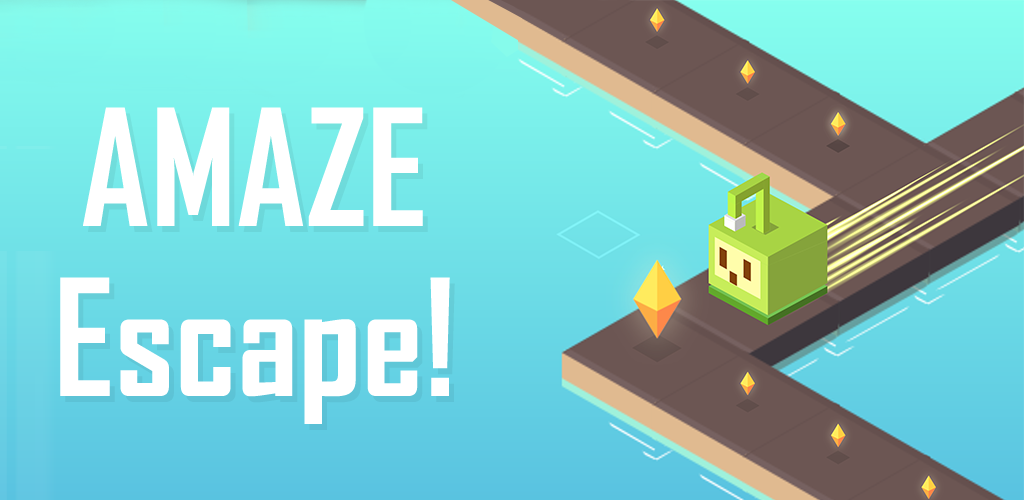
<style>
.page{position:relative;width:1024px;height:500px}
.page>*{position:absolute;margin:0}
.t1{font:155px "AgencyFB-Bold";color:#ffffff}
</style>
<div class="page">
<p class="t1" style="left:83px;top:107px;width:340px;height:119px">AMAZE</p>
<p class="t1" style="left:60px;top:277px;width:390px;height:147px">Escape!</p>
</div>
